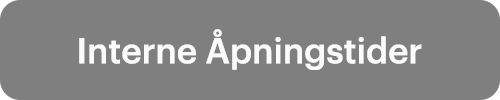
<style>
.page{position:relative;width:500px;height:100px;background:#7f7f7f}
.page>*{position:absolute;margin:0}
.t1{font:35px "false";color:#fcfbfb}
</style>
<div class="page">
<p class="t1" style="left:79px;top:29px;width:343px;height:41px">Interne Åpningstider</p>
</div>
